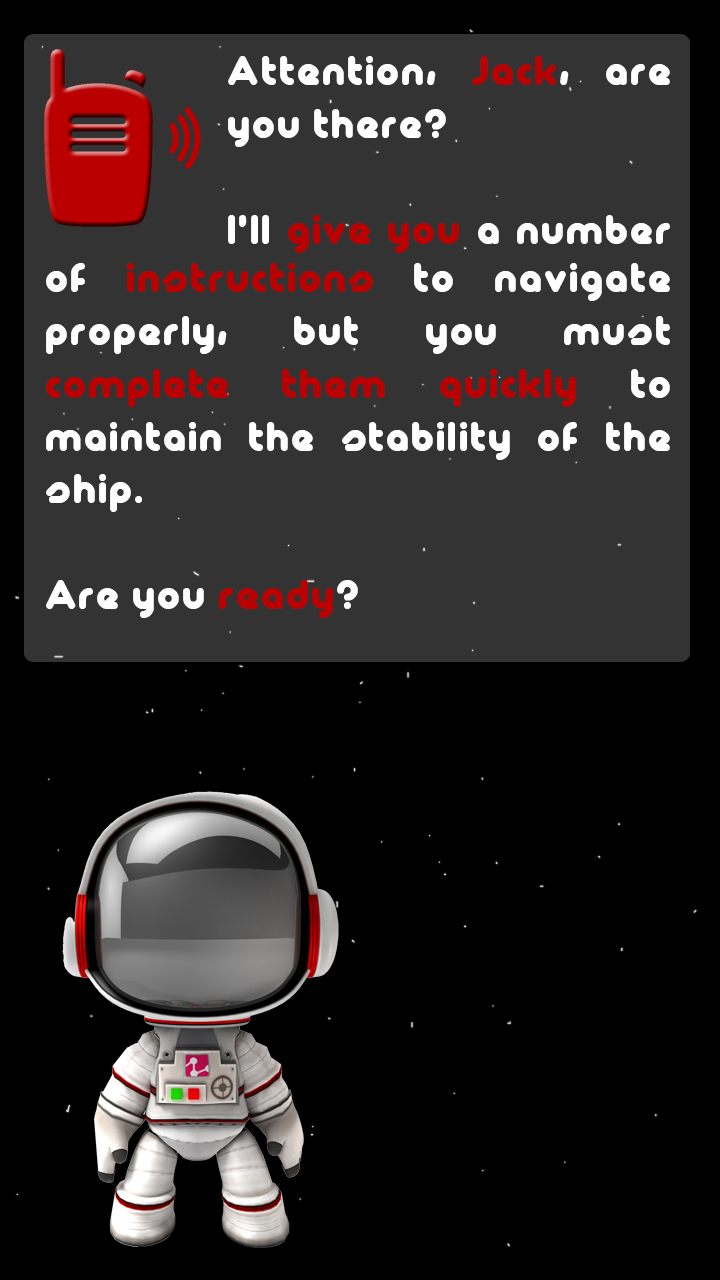
<style>
.page{position:relative;width:720px;height:1280px;background:#000000}
.page>*{position:absolute;margin:0}
.t1{font:44px "Maagkramp";color:#ffffff}
.t2{font:44px "Maagkramp";color:#ba0000}
</style>
<div class="page">
<p class="t1" style="left:228px;top:56px;width:442px;height:197px;text-align:justify">Attention, <span class="t2">Jack</span>, are you there?<br><br>I'll <span class="t2">give you</span> a number</p>
<p class="t1" style="left:46px;top:263px;width:624px;height:355px;text-align:justify">of <span class="t2">instructions</span> to navigate properly, but you must       <span class="t2">complete them quickly</span> to maintain the stability of the ship.<br><br>Are you <span class="t2">ready</span>?</p>
</div>
